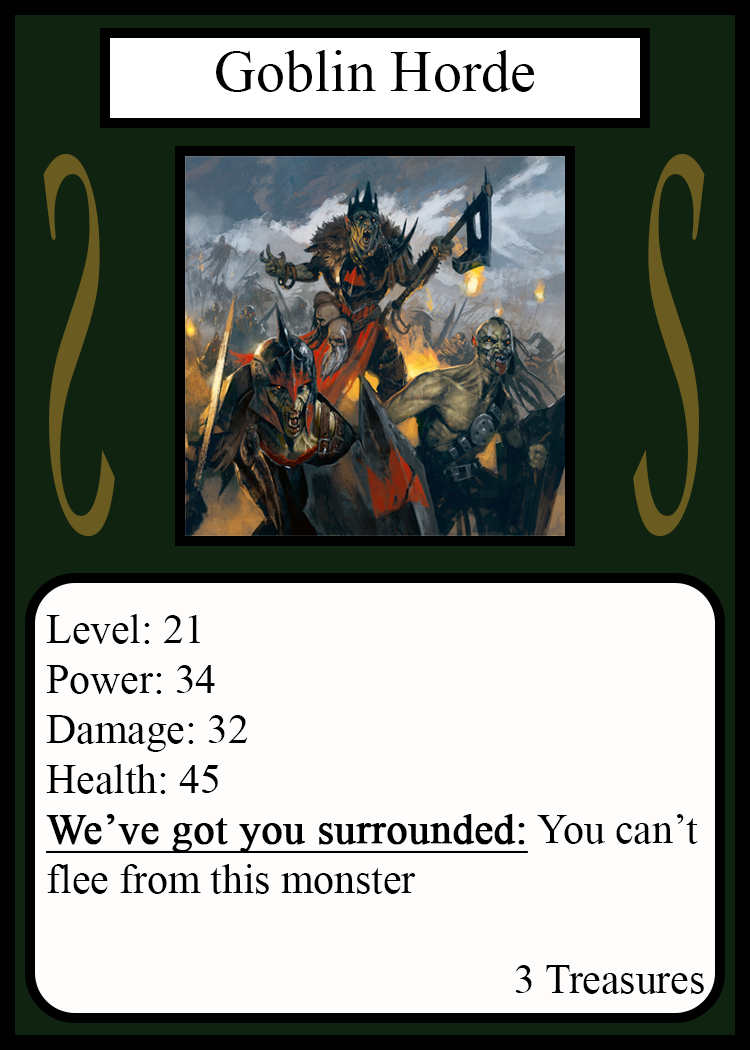
<style>
.page{position:relative;width:750px;height:1050px;background:#fffcfc}
.page>*{position:absolute;margin:0}
.t1{font:58.3px "TimesNewRomanPSMT";color:#010101}
.t2{font:548.5px "Apple-Chancery";color:#6a5c21;scale:0.27 1}
.t3{font:548.2px "Apple-Chancery";color:#6a5c21;scale:0.27 1}
.t4{font:41.7px "TimesNewRomanPSMT";color:#000000}
.t5{font:41.7px "TimesNewRomanPSMT";color:#000000;font-weight:bold;text-decoration:underline}
</style>
<div class="page">
<p class="t1" style="left:216px;top:50px;width:319px;height:42px">Goblin Horde</p>
<p class="t2" style="left:43px;top:154px;width:72px;height:382px;rotate:180deg">S</p>
<p class="t3" style="left:633px;top:154px;width:72px;height:382px">S</p>
<p class="t4" style="left:46px;top:614px;width:658px;height:380px">Level: 21<br>Power: 34<br>Damage: 32<br>Health: 45<br><span class="t5">We’ve got you surrounded:</span> You can’t<br>flee from this monster <br><br>             3 Treasures</p>
</div>
